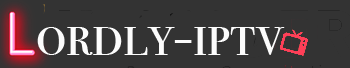
<style>
.page{position:relative;width:350px;height:68px;background:#333333}
.page>*{position:absolute;margin:0}
.t1{font:60px "BodoniSvtyTwoSCITCTT-Book";color:#fcfcfc}
</style>
<div class="page">
<p class="t1" style="left:37px;top:27px;width:248px;height:28px">ordly-iptv</p>
</div>
